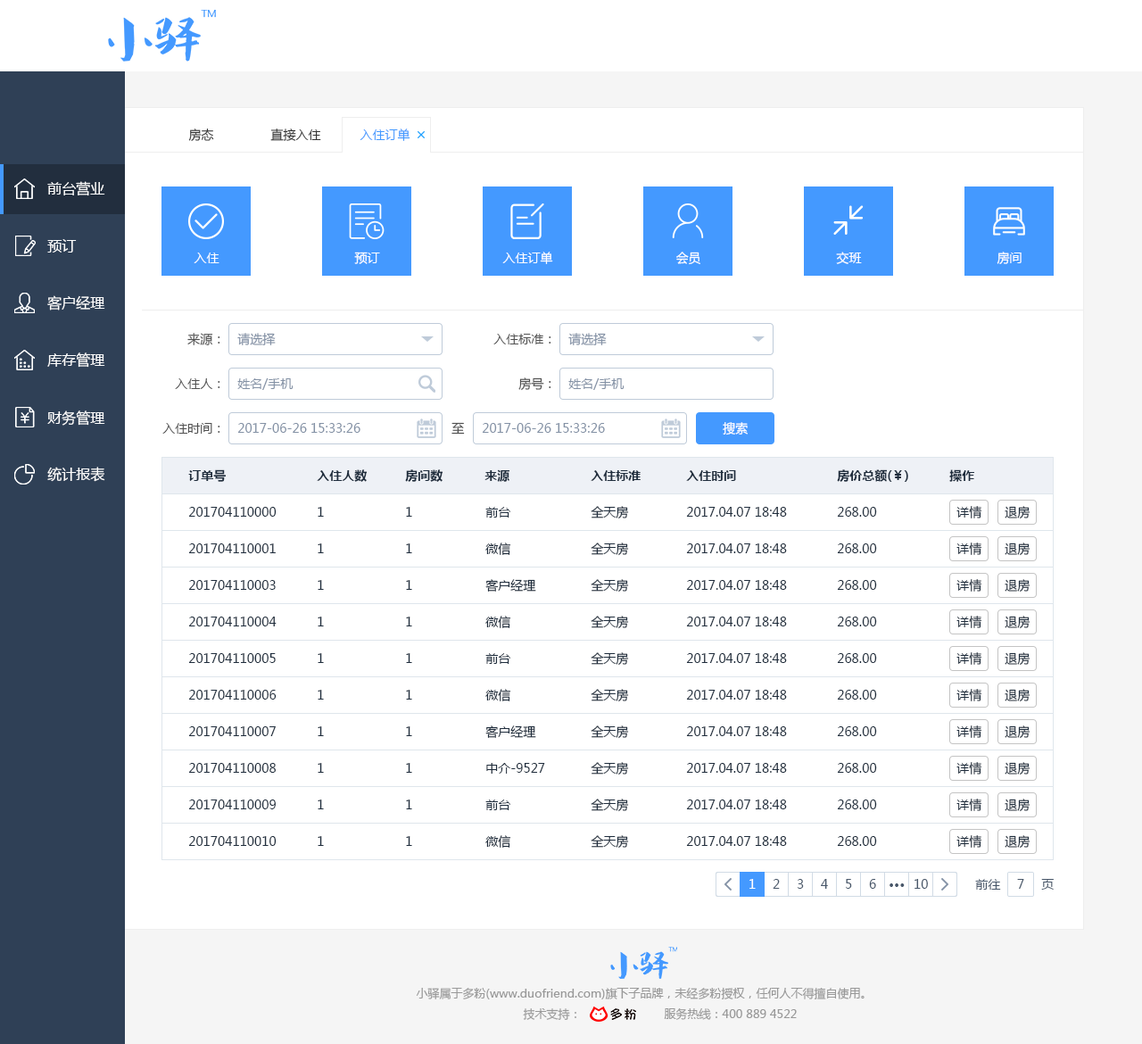
<style>
.page{position:relative;width:1142px;height:1044px;background:#ffffff}
.page>*{position:absolute;margin:0}
.t1{font:12.5px "MicrosoftYaHei";color:#333333}
.t2{font:12.5px "MicrosoftYaHei";color:#4499ff}
.t3{font:14.3px "MicrosoftYaHei";color:#ffffff}
.t4{font:12.5px "MicrosoftYaHei";color:#ffffff}
.t5{font:12.5px "MicrosoftYaHei";color:#505050}
.t6{font:12.5px "MicrosoftYaHei";color:#8391a5}
.t7{font:12.5px "MicrosoftYaHei-Bold";color:#1f2d3d}
.t8{font:12.5px "MicrosoftYaHei";color:#1f2d3d}
.t9{font:12.5px "MicrosoftYaHei";color:#48576a}
.t10{font:12.5px "MicrosoftYaHei-Bold";color:#48576a}
.t11{font:11.6px "MicrosoftYaHei";color:#999999}
</style>
<div class="page">
<p class="t1" style="left:188px;top:128px;width:26px;height:13px">房态</p>
<p class="t1" style="left:270px;top:128px;width:51px;height:13px">直接入住</p>
<p class="t2" style="left:360px;top:128px;width:50px;height:13px">入住订单</p>
<p class="t3" style="left:47px;top:181px;width:58px;height:15px">前台营业</p>
<p class="t3" style="left:47px;top:239px;width:30px;height:14px">预订</p>
<p class="t4" style="left:194px;top:253px;width:26px;height:10px">入住</p>
<p class="t4" style="left:354px;top:252px;width:26px;height:12px">预订</p>
<p class="t4" style="left:502px;top:252px;width:51px;height:12px">入住订单</p>
<p class="t4" style="left:676px;top:252px;width:24px;height:13px">会员</p>
<p class="t4" style="left:836px;top:252px;width:26px;height:12px">交班</p>
<p class="t4" style="left:997px;top:252px;width:25px;height:12px">房间</p>
<p class="t3" style="left:47px;top:295px;width:58px;height:16px">客户经理</p>
<p class="t5" style="left:187px;top:333px;width:33px;height:12px">来源：</p>
<p class="t6" style="left:237px;top:333px;width:39px;height:12px">请选择</p>
<p class="t5" style="left:493px;top:334px;width:58px;height:10px">入住标准：</p>
<p class="t6" style="left:568px;top:333px;width:39px;height:12px">请选择</p>
<p class="t3" style="left:47px;top:352px;width:58px;height:16px">库存管理</p>
<p class="t5" style="left:518px;top:377px;width:33px;height:14px">房号：</p>
<p class="t5" style="left:175px;top:378px;width:45px;height:11px">入住人：</p>
<p class="t6" style="left:237px;top:378px;width:57px;height:12px">姓名/手机</p>
<p class="t6" style="left:568px;top:378px;width:57px;height:12px">姓名/手机</p>
<p class="t3" style="left:47px;top:410px;width:58px;height:16px">财务管理</p>
<p class="t5" style="left:162px;top:423px;width:58px;height:11px">入住时间：</p>
<p class="t6" style="left:237px;top:423px;width:123px;height:10px">2017-06-26 15:33:26</p>
<p class="t5" style="left:452px;top:422px;width:13px;height:13px">至</p>
<p class="t6" style="left:482px;top:423px;width:123px;height:10px">2017-06-26 15:33:26</p>
<p class="t4" style="left:723px;top:422px;width:25px;height:13px">搜索</p>
<p class="t3" style="left:47px;top:467px;width:58px;height:15px">统计报表</p>
<p class="t7" style="left:188px;top:469px;width:38px;height:13px">订单号</p>
<p class="t7" style="left:317px;top:469px;width:50px;height:13px">入住人数</p>
<p class="t7" style="left:405px;top:469px;width:38px;height:13px">房间数</p>
<p class="t7" style="left:485px;top:469px;width:25px;height:13px">来源</p>
<p class="t7" style="left:591px;top:470px;width:50px;height:11px">入住标准</p>
<p class="t7" style="left:686px;top:470px;width:50px;height:11px">入住时间</p>
<p class="t7" style="left:837px;top:469px;width:71px;height:13px">房价总额(￥)</p>
<p class="t7" style="left:949px;top:469px;width:25px;height:13px">操作</p>
<p class="t8" style="left:188px;top:507px;width:89px;height:10px">201704110000</p>
<p class="t8" style="left:318px;top:507px;width:6px;height:10px">1</p>
<p class="t8" style="left:406px;top:507px;width:6px;height:10px">1</p>
<p class="t8" style="left:485px;top:507px;width:25px;height:11px">前台</p>
<p class="t8" style="left:591px;top:506px;width:38px;height:13px">全天房</p>
<p class="t8" style="left:686px;top:507px;width:101px;height:10px">2017.04.07 18:48</p>
<p class="t8" style="left:837px;top:507px;width:40px;height:10px">268.00</p>
<p class="t8" style="left:957px;top:506px;width:25px;height:12px">详情</p>
<p class="t8" style="left:1005px;top:506px;width:26px;height:13px">退房</p>
<p class="t8" style="left:188px;top:543px;width:88px;height:10px">201704110001</p>
<p class="t8" style="left:318px;top:543px;width:6px;height:10px">1</p>
<p class="t8" style="left:406px;top:543px;width:6px;height:10px">1</p>
<p class="t8" style="left:485px;top:543px;width:26px;height:12px">微信</p>
<p class="t8" style="left:591px;top:543px;width:38px;height:13px">全天房</p>
<p class="t8" style="left:686px;top:543px;width:101px;height:10px">2017.04.07 18:48</p>
<p class="t8" style="left:837px;top:543px;width:40px;height:10px">268.00</p>
<p class="t8" style="left:957px;top:543px;width:25px;height:12px">详情</p>
<p class="t8" style="left:1005px;top:543px;width:26px;height:13px">退房</p>
<p class="t8" style="left:188px;top:580px;width:88px;height:10px">201704110003</p>
<p class="t8" style="left:318px;top:580px;width:6px;height:10px">1</p>
<p class="t8" style="left:406px;top:580px;width:6px;height:10px">1</p>
<p class="t8" style="left:485px;top:579px;width:51px;height:13px">客户经理</p>
<p class="t8" style="left:591px;top:579px;width:38px;height:13px">全天房</p>
<p class="t8" style="left:686px;top:580px;width:101px;height:10px">2017.04.07 18:48</p>
<p class="t8" style="left:837px;top:580px;width:40px;height:10px">268.00</p>
<p class="t8" style="left:957px;top:579px;width:25px;height:13px">详情</p>
<p class="t8" style="left:1005px;top:579px;width:26px;height:13px">退房</p>
<p class="t8" style="left:188px;top:617px;width:89px;height:9px">201704110004</p>
<p class="t8" style="left:318px;top:617px;width:6px;height:9px">1</p>
<p class="t8" style="left:406px;top:617px;width:6px;height:9px">1</p>
<p class="t8" style="left:485px;top:616px;width:26px;height:12px">微信</p>
<p class="t8" style="left:591px;top:616px;width:38px;height:13px">全天房</p>
<p class="t8" style="left:686px;top:617px;width:101px;height:9px">2017.04.07 18:48</p>
<p class="t8" style="left:837px;top:617px;width:40px;height:9px">268.00</p>
<p class="t8" style="left:957px;top:616px;width:25px;height:12px">详情</p>
<p class="t8" style="left:1005px;top:616px;width:26px;height:13px">退房</p>
<p class="t8" style="left:188px;top:653px;width:88px;height:10px">201704110005</p>
<p class="t8" style="left:318px;top:653px;width:6px;height:10px">1</p>
<p class="t8" style="left:406px;top:653px;width:6px;height:10px">1</p>
<p class="t8" style="left:485px;top:653px;width:25px;height:11px">前台</p>
<p class="t8" style="left:591px;top:652px;width:38px;height:14px">全天房</p>
<p class="t8" style="left:686px;top:653px;width:101px;height:10px">2017.04.07 18:48</p>
<p class="t8" style="left:837px;top:653px;width:40px;height:10px">268.00</p>
<p class="t8" style="left:957px;top:652px;width:25px;height:13px">详情</p>
<p class="t8" style="left:1005px;top:652px;width:26px;height:14px">退房</p>
<p class="t8" style="left:188px;top:690px;width:89px;height:10px">201704110006</p>
<p class="t8" style="left:318px;top:690px;width:6px;height:10px">1</p>
<p class="t8" style="left:406px;top:690px;width:6px;height:10px">1</p>
<p class="t8" style="left:485px;top:689px;width:26px;height:12px">微信</p>
<p class="t8" style="left:591px;top:689px;width:38px;height:13px">全天房</p>
<p class="t8" style="left:686px;top:690px;width:101px;height:10px">2017.04.07 18:48</p>
<p class="t8" style="left:837px;top:690px;width:40px;height:10px">268.00</p>
<p class="t8" style="left:957px;top:689px;width:25px;height:12px">详情</p>
<p class="t8" style="left:1005px;top:689px;width:26px;height:13px">退房</p>
<p class="t8" style="left:485px;top:725px;width:51px;height:13px">客户经理</p>
<p class="t8" style="left:591px;top:725px;width:38px;height:14px">全天房</p>
<p class="t8" style="left:957px;top:725px;width:25px;height:13px">详情</p>
<p class="t8" style="left:1005px;top:725px;width:26px;height:14px">退房</p>
<p class="t8" style="left:188px;top:726px;width:88px;height:10px">201704110007</p>
<p class="t8" style="left:318px;top:726px;width:6px;height:10px">1</p>
<p class="t8" style="left:406px;top:726px;width:6px;height:10px">1</p>
<p class="t8" style="left:686px;top:726px;width:101px;height:10px">2017.04.07 18:48</p>
<p class="t8" style="left:837px;top:726px;width:40px;height:10px">268.00</p>
<p class="t8" style="left:188px;top:763px;width:88px;height:10px">201704110008</p>
<p class="t8" style="left:318px;top:763px;width:6px;height:10px">1</p>
<p class="t8" style="left:406px;top:763px;width:6px;height:10px">1</p>
<p class="t8" style="left:486px;top:763px;width:59px;height:11px">中介-9527</p>
<p class="t8" style="left:591px;top:762px;width:38px;height:13px">全天房</p>
<p class="t8" style="left:686px;top:763px;width:101px;height:10px">2017.04.07 18:48</p>
<p class="t8" style="left:837px;top:763px;width:40px;height:10px">268.00</p>
<p class="t8" style="left:957px;top:762px;width:25px;height:13px">详情</p>
<p class="t8" style="left:1005px;top:762px;width:26px;height:13px">退房</p>
<p class="t8" style="left:188px;top:800px;width:88px;height:9px">201704110009</p>
<p class="t8" style="left:318px;top:800px;width:6px;height:9px">1</p>
<p class="t8" style="left:406px;top:800px;width:6px;height:9px">1</p>
<p class="t8" style="left:485px;top:800px;width:25px;height:10px">前台</p>
<p class="t8" style="left:591px;top:799px;width:38px;height:13px">全天房</p>
<p class="t8" style="left:686px;top:800px;width:101px;height:9px">2017.04.07 18:48</p>
<p class="t8" style="left:837px;top:800px;width:40px;height:9px">268.00</p>
<p class="t8" style="left:957px;top:799px;width:25px;height:12px">详情</p>
<p class="t8" style="left:1005px;top:799px;width:26px;height:13px">退房</p>
<p class="t8" style="left:188px;top:836px;width:89px;height:10px">201704110010</p>
<p class="t8" style="left:318px;top:836px;width:6px;height:10px">1</p>
<p class="t8" style="left:406px;top:836px;width:6px;height:10px">1</p>
<p class="t8" style="left:485px;top:835px;width:26px;height:13px">微信</p>
<p class="t8" style="left:591px;top:835px;width:38px;height:14px">全天房</p>
<p class="t8" style="left:686px;top:836px;width:101px;height:10px">2017.04.07 18:48</p>
<p class="t8" style="left:837px;top:836px;width:40px;height:10px">268.00</p>
<p class="t8" style="left:957px;top:835px;width:25px;height:13px">详情</p>
<p class="t8" style="left:1005px;top:835px;width:26px;height:14px">退房</p>
<p class="t4" style="left:750px;top:879px;width:6px;height:10px">1</p>
<p class="t9" style="left:773px;top:879px;width:7px;height:10px">2</p>
<p class="t9" style="left:797px;top:879px;width:7px;height:10px">3</p>
<p class="t9" style="left:821px;top:879px;width:7px;height:10px">4</p>
<p class="t9" style="left:846px;top:879px;width:6px;height:10px">5</p>
<p class="t9" style="left:869px;top:879px;width:7px;height:10px">6</p>
<p class="t9" style="left:915px;top:879px;width:13px;height:10px">10</p>
<p class="t9" style="left:975px;top:879px;width:26px;height:11px">前往</p>
<p class="t9" style="left:1017px;top:879px;width:7px;height:10px">7</p>
<p class="t9" style="left:1041px;top:879px;width:13px;height:11px">页</p>
<p class="t10" style="left:890px;top:883px;width:15px;height:4px">···</p>
<p class="t11" style="left:416px;top:987px;width:449px;height:12px">小驿属于多粉(www.duofriend.com)旗下子品牌，未经多粉授权，任何人不得擅自使用。</p>
<p class="t11" style="left:523px;top:1008px;width:53px;height:12px">技术支持：</p>
<p class="t11" style="left:664px;top:1008px;width:133px;height:12px">服务热线：400 889 4522</p>
</div>
